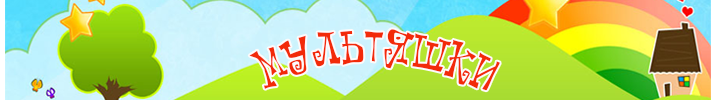
<style>
.page{position:relative;width:720px;height:100px}
.page>*{position:absolute;margin:0}
.t1{font:46.2px "KotLeopold";color:#f22a09;scale:0.95 1}
</style>
<div class="page">
<p class="t1" style="left:249px;top:29px;width:251px;height:62px;rotate:2deg">МУЛЬТЯШКИ</p>
</div>
